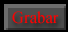
<style>
.page{position:relative;width:68px;height:32px;background:#000000}
.page>*{position:absolute;margin:0}
.t1{font:16.7px "TimesNewRomanPSMT";color:#ff0000}
</style>
<div class="page">
<p class="t1" style="left:12px;top:11px;width:47px;height:13px">Grabar</p>
</div>
